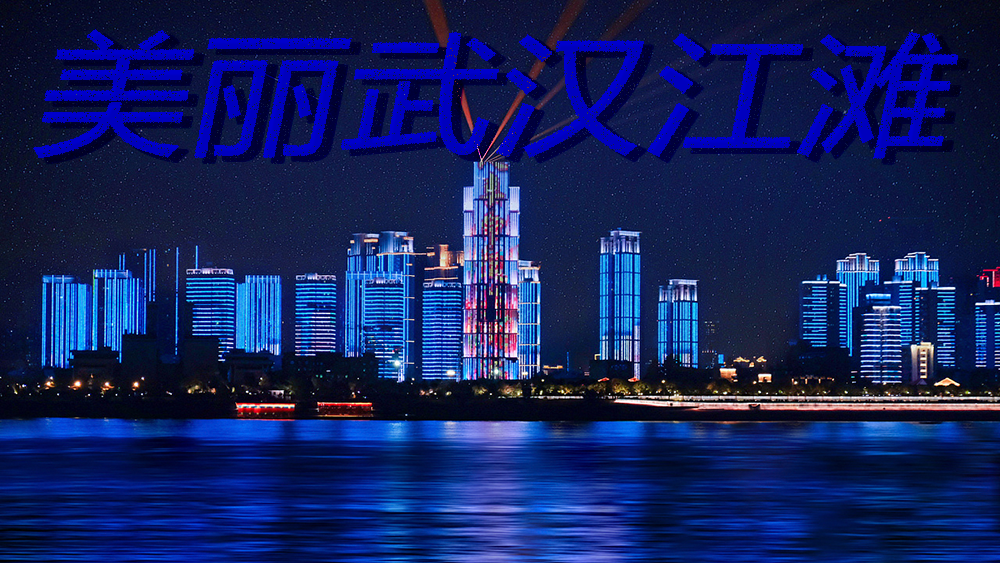
<style>
.page{position:relative;width:1000px;height:563px}
.page>*{position:absolute;margin:0}
.t1{font:130px "MicrosoftYaHei";color:#0000be;font-weight:bold;font-style:italic;scale:1.14 1}
</style>
<div class="page">
<p class="t1" style="left:33px;top:29px;width:926px;height:130px">美丽武汉江滩</p>
</div>
